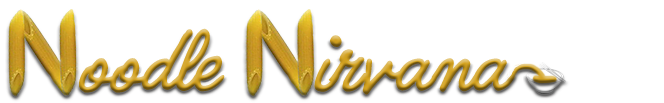
<style>
.page{position:relative;width:664px;height:103px;background:#ffffff}
.page>*{position:absolute;margin:0}
.t1{font:65.7px "QuimbyGubernatorial";letter-spacing:-0.01em}
.t2{font:66.7px "QuimbyGubernatorial";letter-spacing:-0.01em}
</style>
<div class="page">
<p class="t1" style="left:79px;top:28px;width:146px;height:65px">oodle</p>
<p class="t2" style="left:314px;top:35px;width:201px;height:60px">irvana</p>
</div>
